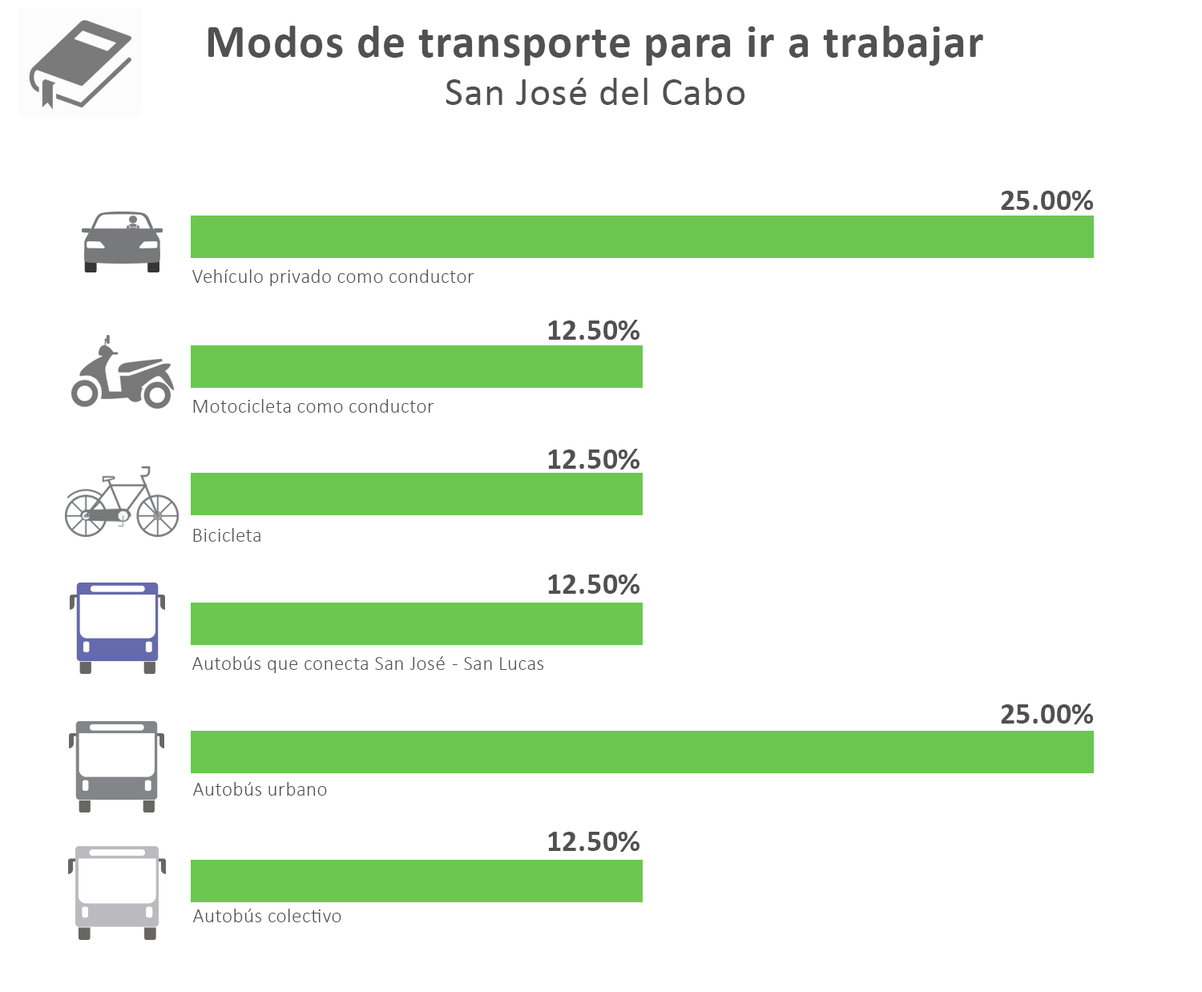
<style>
.page{position:relative;width:1202px;height:992px;background:#ffffff}
.page>*{position:absolute;margin:0}
.t1{font:46.7px "Calibri-Bold";letter-spacing:0.02em;color:#515151}
.t2{font:40.1px "Calibri";letter-spacing:0.02em;color:#515151}
.t3{font:30px "Calibri-Bold";letter-spacing:0.02em;color:#515151}
.t4{font:20px "Calibri-Light";letter-spacing:0.02em;color:#515151}
</style>
<div class="page">
<p class="t1" style="left:208px;top:26px;width:775px;height:40px">Modos de transporte para ir a trabajar</p>
<p class="t2" style="left:446px;top:78px;width:299px;height:27px">San José del Cabo</p>
<p class="t3" style="left:1001px;top:190px;width:92px;height:21px">25.00%</p>
<p class="t4" style="left:192px;top:269px;width:282px;height:17px">Vehículo privado como conductor</p>
<p class="t3" style="left:548px;top:320px;width:91px;height:21px">12.50%</p>
<p class="t4" style="left:193px;top:399px;width:241px;height:14px">Motocicleta como conductor</p>
<p class="t3" style="left:548px;top:449px;width:91px;height:21px">12.50%</p>
<p class="t4" style="left:193px;top:528px;width:67px;height:14px">Bicicleta</p>
<p class="t3" style="left:548px;top:574px;width:91px;height:21px">12.50%</p>
<p class="t4" style="left:192px;top:656px;width:352px;height:17px">Autobús que conecta San José  - San Lucas</p>
<p class="t3" style="left:1001px;top:704px;width:92px;height:20px">25.00%</p>
<p class="t4" style="left:193px;top:782px;width:134px;height:14px">Autobús urbano</p>
<p class="t3" style="left:548px;top:831px;width:91px;height:21px">12.50%</p>
<p class="t4" style="left:193px;top:909px;width:148px;height:13px">Autobús colectivo</p>
</div>
